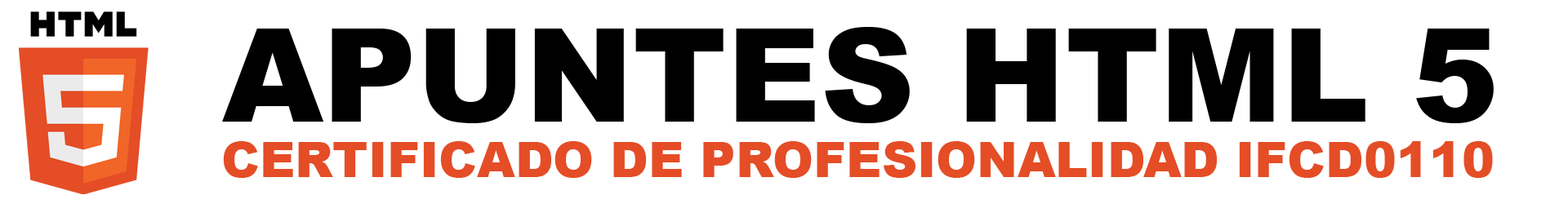
<style>
.page{position:relative;width:1568px;height:204px;background:#ffffff}
.page>*{position:absolute;margin:0}
.t1{font:129.8px "Arial-Black";color:#000000}
.t2{font:49px "Arial-Black";color:#e44d26}
</style>
<div class="page">
<p class="t1" style="left:222px;top:27px;width:1272px;height:96px">APUNTES HTML 5</p>
<p class="t2" style="left:223px;top:141px;width:1270px;height:37px">CERTIFICADO DE PROFESIONALIDAD IFCD0110</p>
</div>
